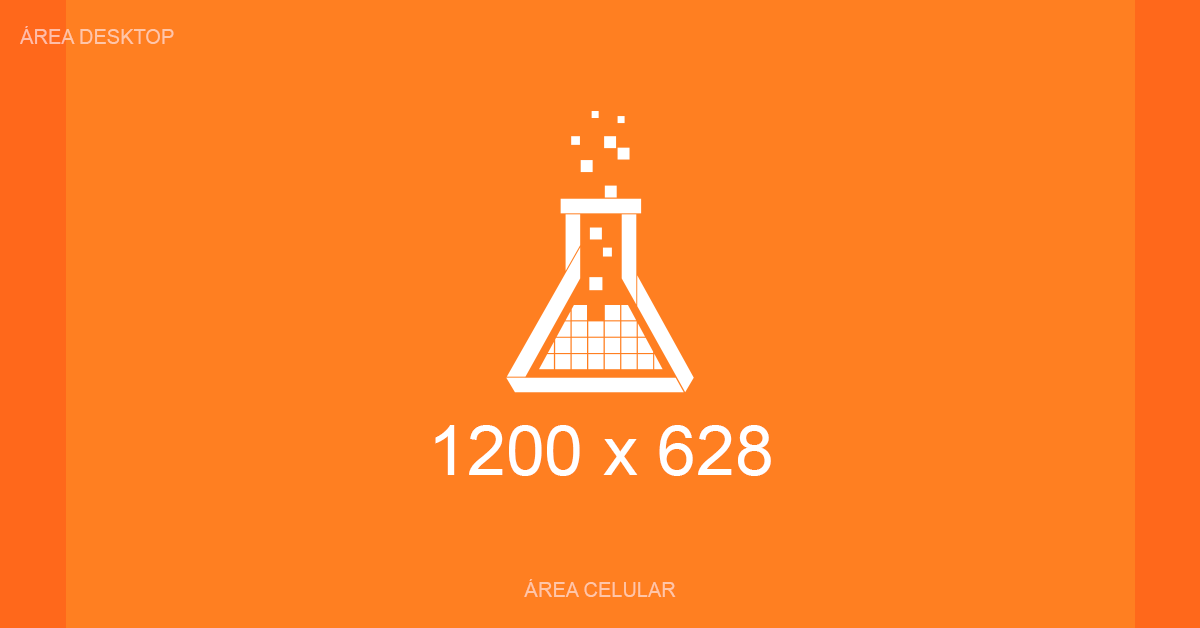
<style>
.page{position:relative;width:1200px;height:628px;background:#ff7f21}
.page>*{position:absolute;margin:0}
.t1{font:20px "ArialMT";color:#ffc6a9;text-transform:uppercase}
.t2{font:70px "ArialMT";color:#ffffff}
</style>
<div class="page">
<p class="t1" style="left:20px;top:26px;width:154px;height:18px">área desktop</p>
<p class="t2" style="left:435px;top:425px;width:336px;height:51px">1200 x 628</p>
<p class="t1" style="left:524px;top:579px;width:152px;height:18px">área celular</p>
</div>
